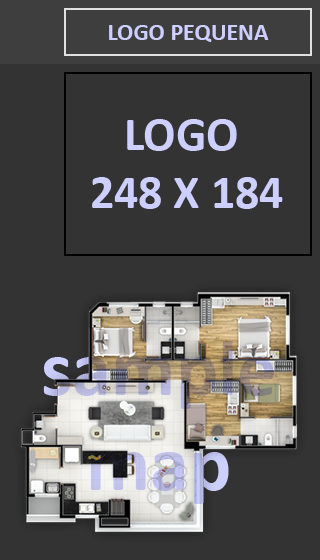
<style>
.page{position:relative;width:320px;height:560px;background:#333333}
.page>*{position:absolute;margin:0}
.t1{font:24px "Calibri-Bold";color:#cdcffe}
.t2{font:48px "Calibri-Bold";color:#cdcffe}
</style>
<div class="page">
<p class="t1" style="left:109px;top:25px;width:160px;height:17px">LOGO PEQUENA</p>
<p class="t2" style="left:92px;top:119px;width:191px;height:90px;text-align:center">LOGO <br>248 X 184</p>
</div>
